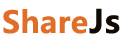
<style>
.page{position:relative;width:120px;height:45px;background:#ffffff}
.page>*{position:absolute;margin:0}
.t1{font:30px "MicrosoftYaHei-Bold";letter-spacing:0.01em;color:#e06e28}
.t2{font:32px "MicrosoftYaHei-Bold";letter-spacing:0.01em;color:#120a04}
</style>
<div class="page">
<p class="t1" style="left:3px;top:9px;width:85px;height:25px">Share</p>
<p class="t2" style="left:89px;top:8px;width:31px;height:26px">Js</p>
</div>
